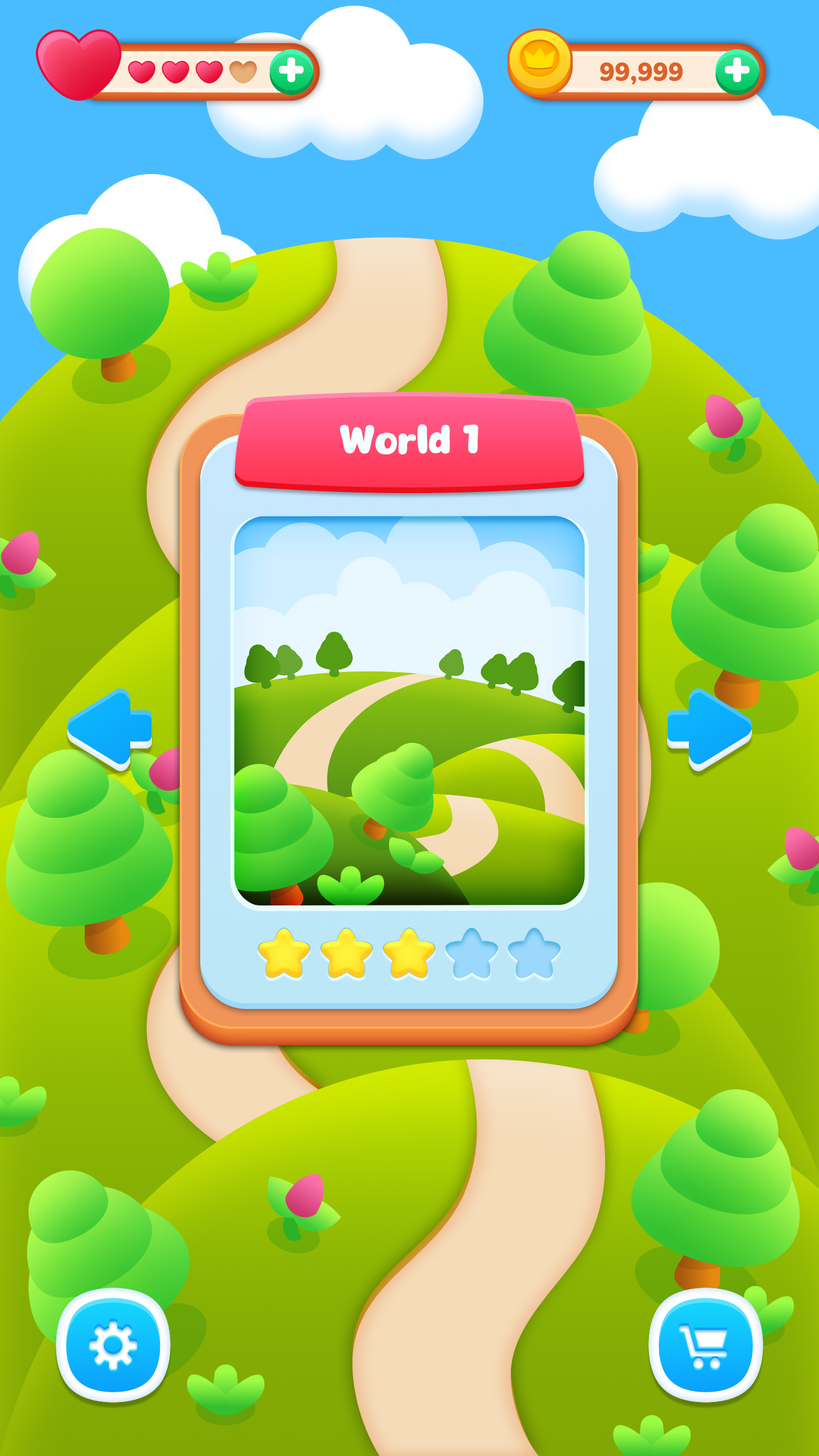
<style>
.page{position:relative;width:819px;height:1456px}
.page>*{position:absolute;margin:0}
.t1{font:39.4px "Eazy-Chat";color:#f5ffff}
</style>
<div class="page">
<p class="t1" style="left:340px;top:424px;width:138px;height:30px">World 1</p>
</div>
